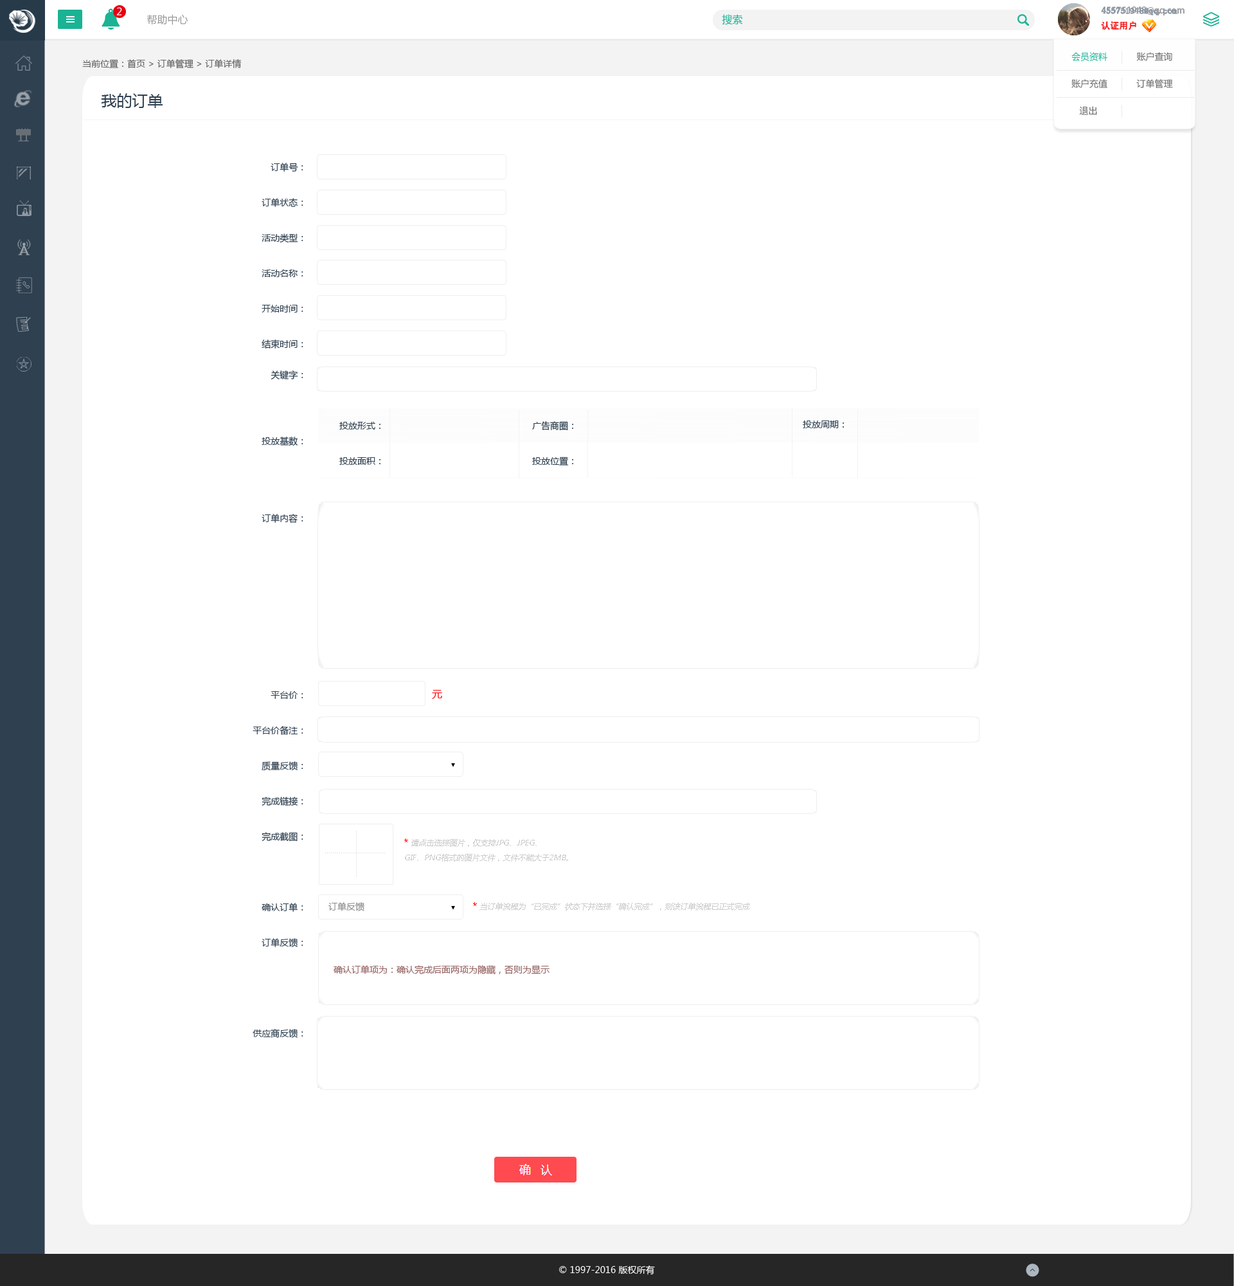
<style>
.page{position:relative;width:1234px;height:1286px;background:#ffffff}
.page>*{position:absolute;margin:0}
.t1{font:10.3px "MicrosoftYaHei";color:#ffffff}
.t2{font:10.3px "MicrosoftYaHei";color:#999999}
.t3{font:10.3px "MicrosoftYaHei";color:#1ab394}
.t4{font:9px/15.4px "AdobeHeitiStd-Regular";color:#999999}
.t5{font:9px/15.4px "AdobeHeitiStd-Regular";color:#f61e1e}
.t6{font:9px/15.4px "AdobeHeitiStd-Regular";color:#ffffff}
.t7{font:9px/15.4px "SimSun";color:#8894a4;font-weight:bold}
.t8{font:9px/15.4px "SimSun";color:#f61e1e}
.t9{font:9px/27px "MicrosoftYaHei";color:#666666}
.t10{font:9px/27px "MicrosoftYaHei";color:#1ab394}
.t11{font:9px "MicrosoftYaHei";color:#666666}
.t12{font:15.4px "MicrosoftYaHei";color:#2f4050}
.t13{font:9px/35.4px "MicrosoftYaHei";color:#2f4050}
.t14{font:9px/30.9px "MicrosoftYaHei";color:#2f4050}
.t15{font:9px "MicrosoftYaHei";color:#2f4050}
.t16{font:10.3px "MicrosoftYaHei";color:#ff0107}
.t17{font:7.7px "MicrosoftYaHei";color:#cccccc;font-style:italic}
.t18{font:9px "MicrosoftYaHei";color:#ff0000}
.t19{font:9px "MicrosoftYaHei";color:#8b8b8b}
.t20{font:9px "MicrosoftYaHei";color:#956262}
.t21{font:9px "MicrosoftYaHei";color:#ffffff}
</style>
<div class="page">
<p class="t1" style="left:116px;top:7px;width:6px;height:8px">2</p>
<p class="t2" style="left:147px;top:14px;width:41px;height:11px">帮助中心</p>
<p class="t3" style="left:722px;top:14px;width:21px;height:11px">搜索</p>
<p class="t4" style="left:1101px;top:6px;width:84px;height:24px">455751948@qq.com<br><span class="t5">认证用户               </span><span class="t6">退出</span></p>
<p class="t7" style="left:1101px;top:7px;width:77px;height:23px">455751948@qq.com<br><span class="t8">认证用户</span></p>
<p class="t9" style="left:1072px;top:52px;width:101px;height:63px"><span class="t10">会员资料</span>           账户查询<br>账户充值           订单管理           <br>   退出</p>
<p class="t11" style="left:82px;top:59px;width:160px;height:10px">当前位置：首页 &gt; 订单管理 &gt; 订单详情</p>
<p class="t12" style="left:101px;top:93px;width:62px;height:15px">我的订单</p>
<p class="t13" style="left:253px;top:163px;width:50px;height:875px;text-align:right">订单号：<br>订单状态：<br>活动类型：<br>活动名称：<br>开始时间：<br><span class="t14">结束时间：<br></span>关键字：<br><br>投放基数：<br><br>订单内容：<br><br><br><br><br>平台价：<br>平台价备注：<br>质量反馈：<br>完成链接：<br>完成截图：<br><br>确认订单：<br>订单反馈：<br><br><br>供应商反馈：</p>
<p class="t13" style="left:339px;top:422px;width:42px;height:43px">投放形式：<br>投放面积：</p>
<p class="t13" style="left:532px;top:421px;width:41px;height:44px">广告商圈：<br>投放位置：</p>
<p class="t15" style="left:803px;top:420px;width:41px;height:8px">投放周期：</p>
<p class="t16" style="left:432px;top:690px;width:10px;height:9px">元</p>
<p class="t17" style="left:404px;top:838px;width:164px;height:23px"><span class="t18">* </span>请点击选择图片，仅支持JPG、JPEG、<br>GIF、PNG格式的图片文件，文件不能大于2MB。</p>
<p class="t19" style="left:328px;top:902px;width:36px;height:9px">订单反馈</p>
<p class="t17" style="left:473px;top:902px;width:277px;height:8px"><span class="t18">* </span>当订单流程为“已完成”状态下并选择“确认完成”，则该订单流程已正式完成</p>
<p class="t20" style="left:334px;top:965px;width:216px;height:10px">确认订单项为：确认完成后面两项为隐藏，否则为显示</p>
<p class="t21" style="left:559px;top:1265px;width:96px;height:10px">© 1997-2016 版权所有</p>
</div>
